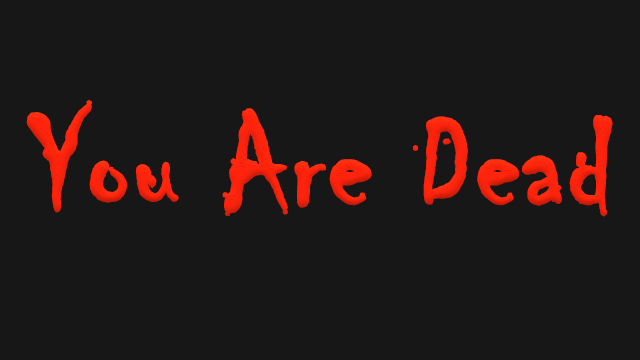
<style>
.page{position:relative;width:640px;height:360px;background:#171717}
.page>*{position:absolute;margin:0}
.t1{font:138.4px "Chiller-Regular";color:#fe230c;font-weight:bold;scale:0.95 1}
</style>
<div class="page">
<p class="t1" style="left:26px;top:100px;width:587px;height:117px">You Are Dead</p>
</div>
